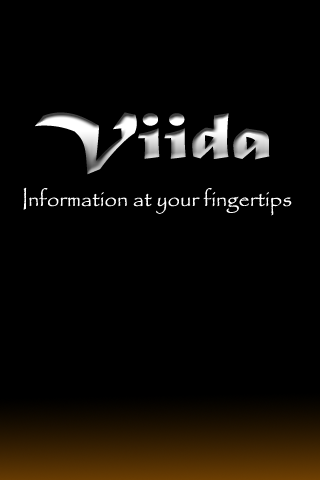
<style>
.page{position:relative;width:320px;height:480px;background:#000000}
.page>*{position:absolute;margin:0}
.t1{font:68.6px "MaturaMTScriptCapitals";scale:1.23 1}
.t2{font:22px "Papyrus-Regular";color:#fdfdfd}
</style>
<div class="page">
<p class="t1" style="left:35px;top:112px;width:235px;height:63px">Viida</p>
<p class="t2" style="left:23px;top:187px;width:269px;height:29px">Information at your fingertips</p>
</div>
